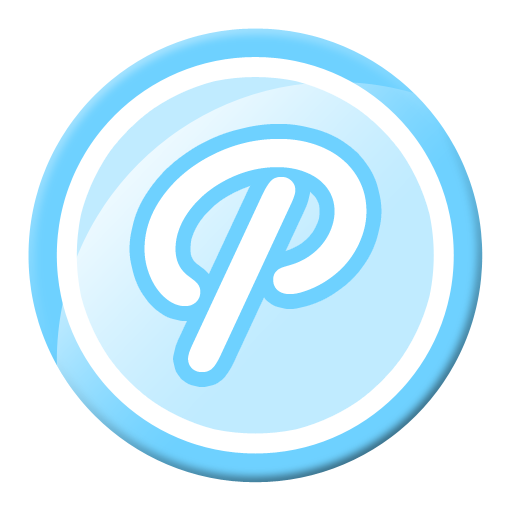
<style>
.page{position:relative;width:512px;height:512px;background:#ffffff}
.page>*{position:absolute;margin:0}
.t1{font:350px "SantaFeLetPlain";color:#ffffff}
</style>
<div class="page">
<p class="t1" style="left:144px;top:139px;width:223px;height:233px">P</p>
</div>
